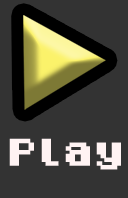
<style>
.page{position:relative;width:128px;height:198px;background:#333333}
.page>*{position:absolute;margin:0}
.t1{font:60px "8-Bit-Madness";color:#fff3f3;font-weight:bold}
</style>
<div class="page">
<p class="t1" style="left:9px;top:138px;width:112px;height:32px">Play</p>
</div>
